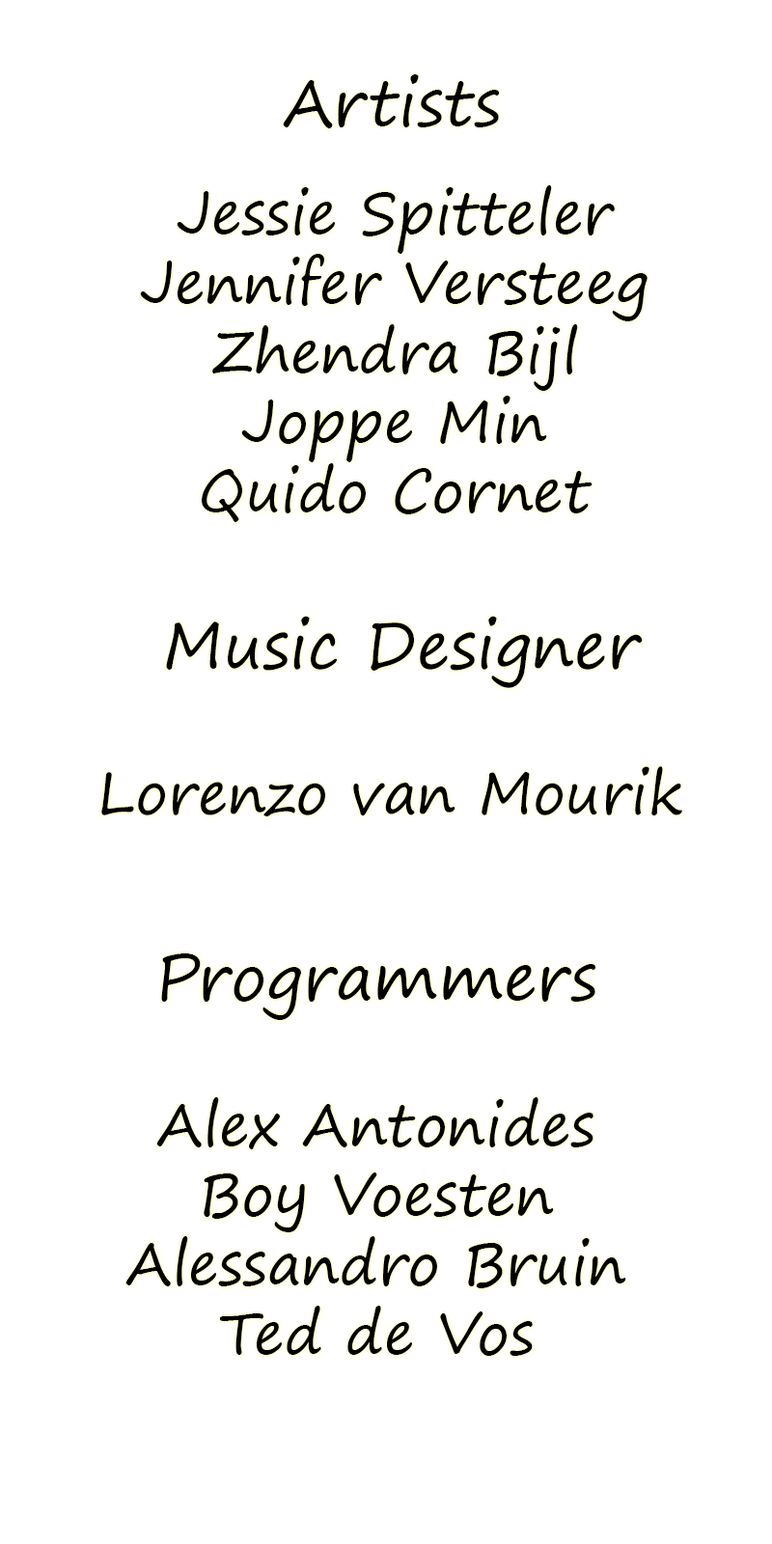
<style>
.page{position:relative;width:772px;height:1544px;background:#ffffff}
.page>*{position:absolute;margin:0}
.t1{font:63.7px "SegoePrint";color:#000000}
.t2{font:57.9px "SegoePrint";color:#000000}
.t3{font:63.6px "SegoePrint";color:#000000}
</style>
<div class="page">
<p class="t1" style="left:283px;top:74px;width:217px;height:54px">Artists</p>
<p class="t2" style="left:140px;top:185px;width:508px;height:337px;text-align:center">Jessie Spitteler<br>Jennifer Versteeg<br>Zhendra Bijl<br>Joppe Min<br>Quido Cornet</p>
<p class="t2" style="left:101px;top:616px;width:581px;height:201px;text-align:center"><span class="t3">   Music Designer<br><br></span>  Lorenzo van Mourik</p>
<p class="t2" style="left:125px;top:954px;width:501px;height:402px;text-align:center"><span class="t1">Programmers<br><br></span>Alex Antonides<br>Boy Voesten<br>Alessandro Bruin<br>Ted de Vos</p>
</div>
